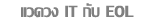
<style>
.page{position:relative;width:148px;height:22px;background:#ffffff}
.page>*{position:absolute;margin:0}
.t1{font:24px "LilyUPC";color:#808080}
</style>
<div class="page">
<p class="t1" style="left:21px;top:3px;width:113px;height:15px">แวดวง IT กับ EOL</p>
</div>
